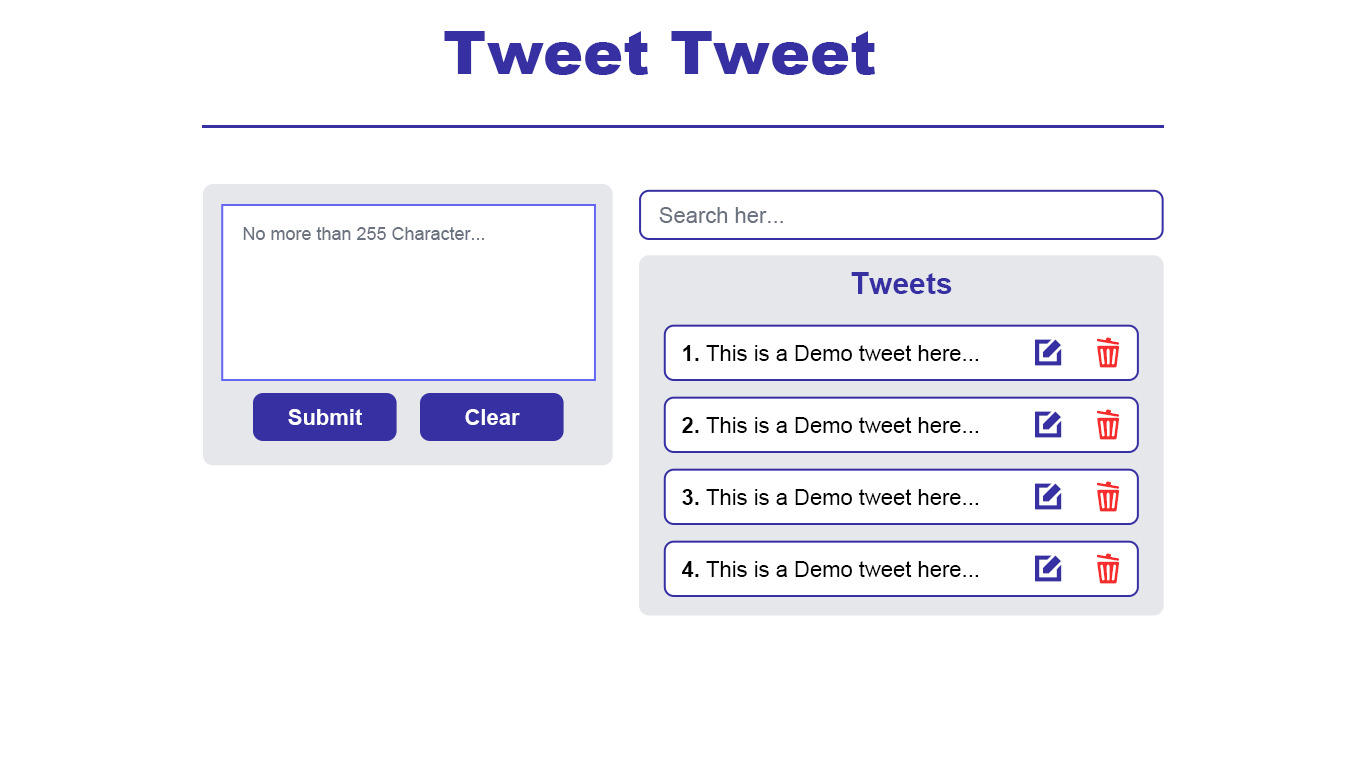
<style>
.page{position:relative;width:1366px;height:768px;background:#ffffff}
.page>*{position:absolute;margin:0}
.t1{font:60px "Arial-Black";color:#3730a3}
.t2{font:22px "ArialMT";color:#6b7280}
.t3{font:18px "ArialMT";color:#6b7280}
.t4{font:30px "Arial-BoldMT";color:#3730a3}
.t5{font:22px "ArialMT";color:#000000}
.t6{font:22px "Arial-BoldMT";color:#000000}
.t7{font:22px "Arial-BoldMT";color:#ffffff}
</style>
<div class="page">
<p class="t1" style="left:444px;top:31px;width:431px;height:44px">Tweet Tweet</p>
<p class="t2" style="left:659px;top:207px;width:124px;height:16px">Search her...</p>
<p class="t3" style="left:243px;top:227px;width:241px;height:13px">No more than 255 Character...</p>
<p class="t4" style="left:851px;top:272px;width:101px;height:22px">Tweets</p>
<p class="t5" style="left:683px;top:345px;width:296px;height:16px"><span class="t6">1. </span>This is a Demo tweet here...</p>
<p class="t7" style="left:288px;top:409px;width:74px;height:16px">Submit</p>
<p class="t7" style="left:465px;top:409px;width:55px;height:16px">Clear</p>
<p class="t5" style="left:682px;top:417px;width:297px;height:16px"><span class="t6">2. </span>This is a Demo tweet here...</p>
<p class="t5" style="left:682px;top:489px;width:297px;height:16px"><span class="t6">3. </span>This is a Demo tweet here...</p>
<p class="t5" style="left:682px;top:561px;width:297px;height:16px"><span class="t6">4. </span>This is a Demo tweet here...</p>
</div>
